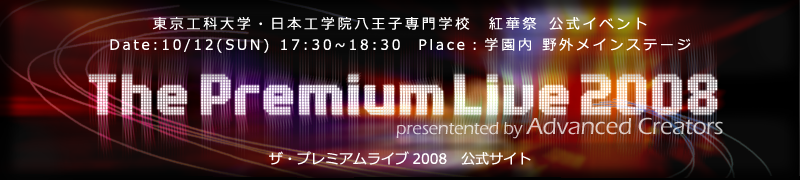
<style>
.page{position:relative;width:800px;height:180px}
.page>*{position:absolute;margin:0}
.t1{font:14px "Meiryo";letter-spacing:0.2em;color:#ffffff}
.t2{font:24px "ErasITC-Medium";letter-spacing:-0.015em;color:#dbc9c6}
.t3{font:18px "ErasITC-Medium";letter-spacing:-0.015em;color:#dbc9c6}
.t4{font:14px "Meiryo";color:#ffffff}
</style>
<div class="page">
<p class="t1" style="left:153px;top:17px;width:494px;height:13px">東京工科大学・日本工学院八王子専門学校 紅華祭 公式イベント</p>
<p class="t1" style="left:110px;top:38px;width:581px;height:15px">Date:10/12(SUN) 17:30~18:30  Place：学園内 野外メインステージ</p>
<p class="t2" style="left:396px;top:117px;width:327px;height:22px"><span class="t3">presentented by </span>Advanced Creators</p>
<p class="t4" style="left:269px;top:151px;width:262px;height:14px">ザ・プレミアムライブ2008 公式サイト</p>
</div>
